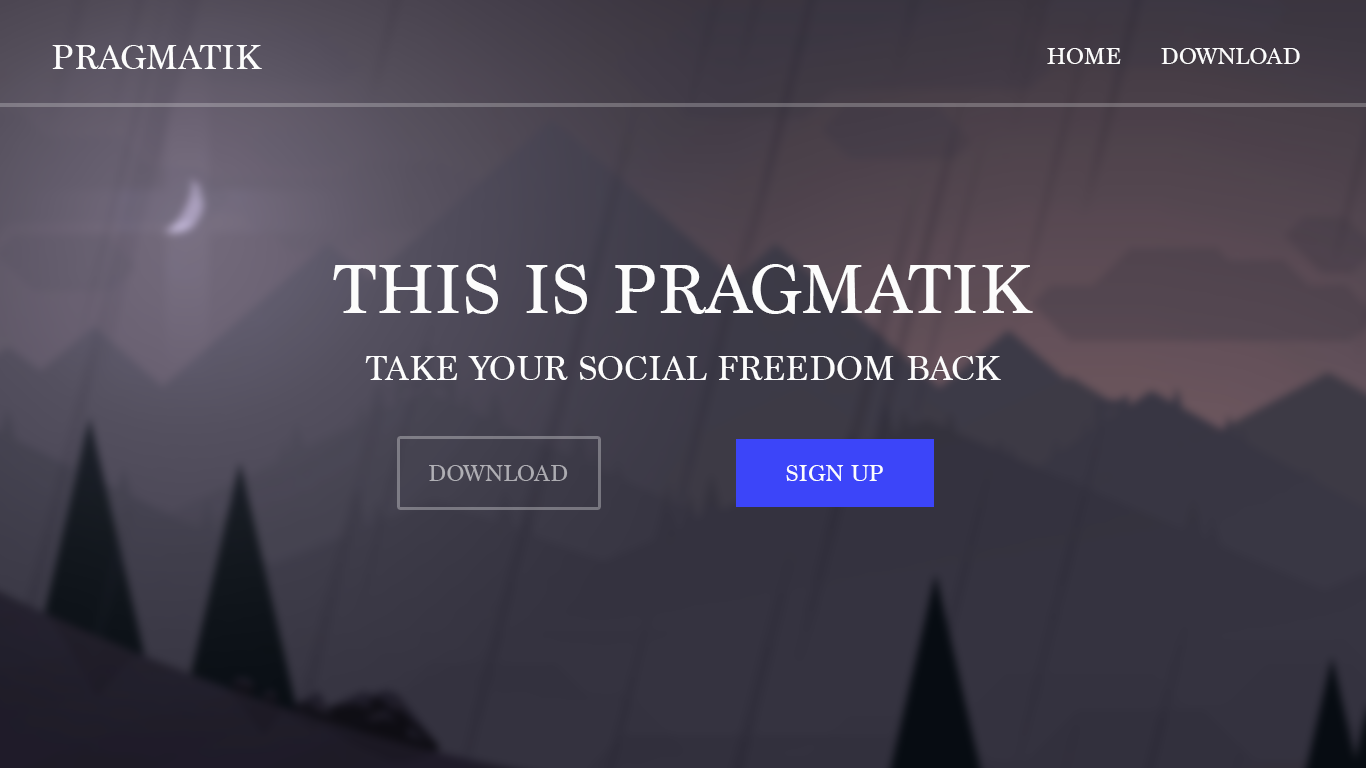
<style>
.page{position:relative;width:1366px;height:768px}
.page>*{position:absolute;margin:0}
.t1{font:36px "Marion-Regular";color:#fcfcfc}
.t2{font:24px "Marion-Regular";color:#fcfcfc}
.t3{font:72px "Marion-Regular";color:#fcfcfc}
</style>
<div class="page">
<p class="t1" style="left:52px;top:45px;width:210px;height:24px">PRAGMATIK</p>
<p class="t2" style="left:1047px;top:48px;width:74px;height:16px">HOME</p>
<p class="t2" style="left:1161px;top:48px;width:139px;height:16px">DOWNLOAD</p>
<p class="t3" style="left:333px;top:264px;width:700px;height:50px">THIS IS PRAGMATIK</p>
<p class="t1" style="left:365px;top:356px;width:636px;height:24px">TAKE YOUR SOCIAL FREEDOM BACK</p>
<p class="t2" style="left:786px;top:465px;width:97px;height:16px">SIGN UP</p>
</div>
